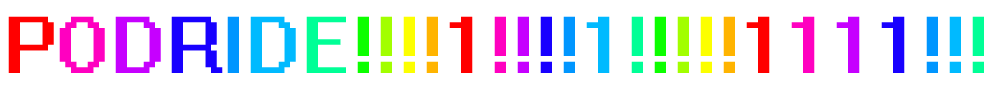
<style>
.page{position:relative;width:1000px;height:94px;background:#ffffff}
.page>*{position:absolute;margin:0}
.t1{font:72px "System";color:#ff0000}
.t2{font:72px "System";color:#ff00c0}
.t3{font:72px "System";color:#c600ff}
.t4{font:72px "System";color:#1800ff}
.t5{font:72px "System";color:#0096ff}
.t6{font:72px "System";color:#00baff}
.t7{font:72px "System";color:#00ff96}
.t8{font:72px "System";color:#0cff00}
.t9{font:72px "System";color:#a2ff00}
.t10{font:72px "System";color:#fcff00}
.t11{font:72px "System";color:#ffb400}
</style>
<div class="page">
<p class="t1" style="left:8px;top:16px;width:976px;height:57px">P<span class="t2">O</span><span class="t3">D</span><span class="t4">R</span><span class="t5">I</span><span class="t6">D</span><span class="t7">E</span><span class="t8">!</span><span class="t9">!</span><span class="t10">!</span><span class="t11">!</span>1<span class="t2">!</span><span class="t3">!</span><span class="t4">!</span><span class="t5">!</span><span class="t6">1</span><span class="t7">!</span><span class="t8">!</span><span class="t9">!</span><span class="t10">!</span><span class="t11">!</span>1<span class="t2">1</span><span class="t3">1</span><span class="t4">1</span><span class="t5">!</span><span class="t6">!</span><span class="t7">!</span></p>
</div>
